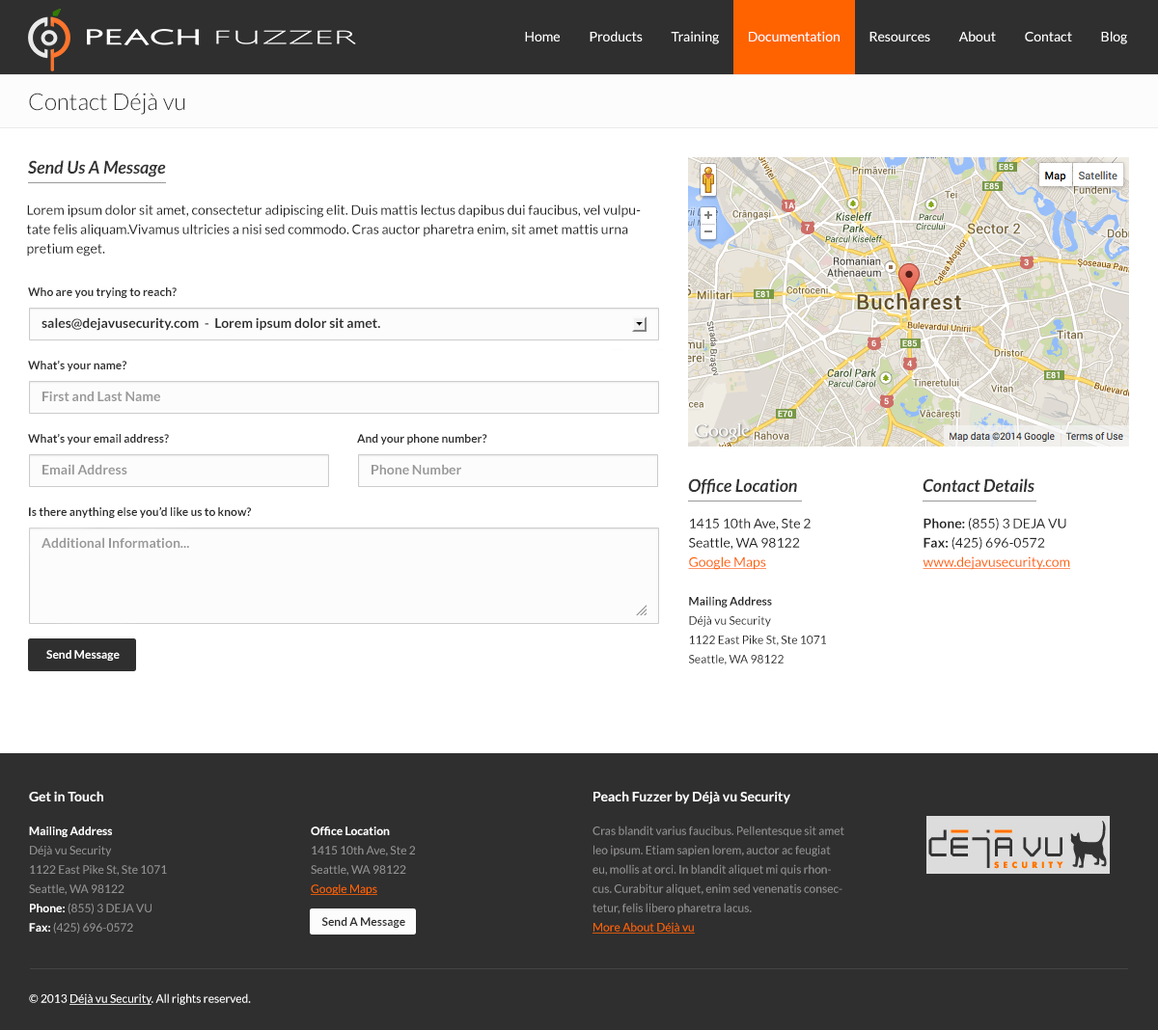
<style>
.page{position:relative;width:1158px;height:1030px;background:#ffffff}
.page>*{position:absolute;margin:0}
.t1{font:13.5px "Lato-Regular";color:#ffffff}
.t2{font:23.2px "Lato-Light";color:#2f2f2f}
.t3{font:17.4px "Lato-BoldItalic";color:#333333}
.t4{font:13.5px/19.3px "Lato-Regular";color:#252525}
.t5{font:11.6px "Lato-Bold";color:#2f2f2f}
.t6{font:13.5px "Lato-Bold";color:#2f2f2f}
.t7{font:13.5px "Lato-Bold";color:#999999}
.t8{font:11.6px/19.3px "Lato-Regular";color:#252525}
.t9{font:13.5px/19.3px "Lato-Regular";color:#ff6300;text-decoration:underline}
.t10{font:11.6px/19.3px "Lato-Bold";color:#252525}
.t11{font:13.5px/19.3px "Lato-Bold";color:#252525}
.t12{font:11.6px "Lato-Bold";color:#ffffff}
.t13{font:13.5px "Lato-Bold";color:#ffffff}
.t14{font:11.6px/19.3px "Lato-Regular";color:#929090}
.t15{font:11.6px/19.3px "Lato-Bold";color:#ffffff}
.t16{font:11.6px/19.3px "Lato-Regular";color:#ff6300;text-decoration:underline}
.t17{font:11.6px "Lato-Regular";color:#ffffff}
.t18{font:11.6px "Lato-Regular";color:#ffffff;text-decoration:underline}
</style>
<div class="page">
<p class="t1" style="left:525px;top:31px;width:602px;height:13px">Home           Products           Training           Documentation           Resources           About           Contact           Blog</p>
<p class="t2" style="left:29px;top:93px;width:156px;height:22px">Contact Déjà vu</p>
<p class="t3" style="left:28px;top:160px;width:138px;height:17px">Send Us A Message</p>
<p class="t4" style="left:26px;top:204px;width:614px;height:53px">Lorem ipsum dolor sit amet, consectetur adipiscing elit. Duis mattis lectus dapibus dui faucibus, vel vulputate felis aliquam.Vivamus ultricies a nisi sed commodo. Cras auctor pharetra enim, sit amet mattis urna pretium eget.</p>
<p class="t5" style="left:28px;top:287px;width:149px;height:11px">Who are you trying to reach?</p>
<p class="t6" style="left:41px;top:317px;width:339px;height:14px">sales@dejavusecurity.com  -  Lorem ipsum dolor sit amet.</p>
<p class="t5" style="left:28px;top:360px;width:98px;height:11px">What’s your name?</p>
<p class="t7" style="left:42px;top:391px;width:118px;height:10px">First and Last Name</p>
<p class="t5" style="left:28px;top:433px;width:141px;height:12px">What’s your email address?</p>
<p class="t5" style="left:357px;top:434px;width:130px;height:11px">And your phone number?</p>
<p class="t7" style="left:42px;top:464px;width:85px;height:11px">Email Address</p>
<p class="t7" style="left:371px;top:464px;width:90px;height:11px">Phone Number</p>
<p class="t3" style="left:688px;top:478px;width:109px;height:17px">Office Location</p>
<p class="t3" style="left:922px;top:478px;width:112px;height:14px">Contact Details</p>
<p class="t5" style="left:29px;top:506px;width:222px;height:12px">Is there anything else you’d like us to know?</p>
<p class="t8" style="left:688px;top:518px;width:138px;height:148px"><span class="t4">1415 10th Ave, Ste 2<br>Seattle, WA 98122<br></span><span class="t9">Google Maps<br><br></span><span class="t10">Mailing Address<br></span>Déjà vu Security<br>1122 East Pike St, Ste 1071<br>Seattle, WA 98122</p>
<p class="t9" style="left:922px;top:517px;width:148px;height:53px"><span class="t11">Phone: </span><span class="t4">(855) 3 DEJA VU<br></span><span class="t11">Fax:</span><span class="t4"> (425) 696-0572<br></span>www.dejavusecurity.com</p>
<p class="t7" style="left:41px;top:537px;width:148px;height:11px">Additional Information...</p>
<p class="t12" style="left:46px;top:650px;width:74px;height:11px">Send Message</p>
<p class="t13" style="left:29px;top:791px;width:74px;height:11px">Get in Touch</p>
<p class="t13" style="left:593px;top:791px;width:197px;height:13px">Peach Fuzzer by Déjà vu Security</p>
<p class="t14" style="left:29px;top:827px;width:138px;height:107px"><span class="t15">Mailing Address<br></span>Déjà vu Security<br>1122 East Pike St, Ste 1071<br>Seattle, WA 98122<br><span class="t15">Phone: </span>(855) 3 DEJA VU<br><span class="t15">Fax: </span>(425) 696-0572</p>
<p class="t14" style="left:311px;top:827px;width:104px;height:68px"><span class="t15">Office Location<br></span>1415 10th Ave, Ste 2<br>Seattle, WA 98122<br><span class="t16">Google Maps</span></p>
<p class="t14" style="left:592px;top:826px;width:252px;height:108px">Cras blandit varius faucibus. Pellentesque sit amet leo ipsum. Etiam sapien lorem, auctor ac feugiat eu, mollis at orci. In blandit aliquet mi quis rhoncus. Curabitur aliquet, enim sed venenatis consectetur, felis libero pharetra lacus.<br><span class="t16">More About Déjà vu</span></p>
<p class="t5" style="left:321px;top:917px;width:84px;height:11px">Send A Message</p>
<p class="t17" style="left:29px;top:994px;width:222px;height:11px">© 2013 <span class="t18">Déjà vu Security</span>. All rights reserved.</p>
</div>
